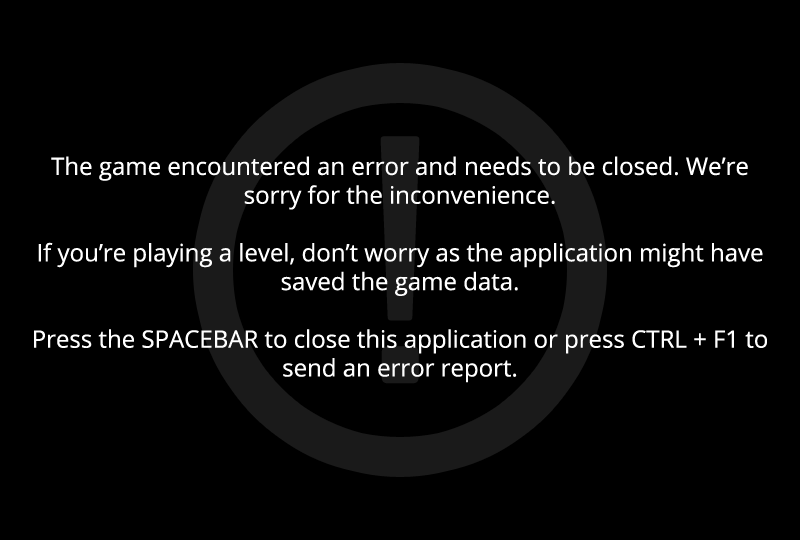
<style>
.page{position:relative;width:800px;height:540px;background:#000000}
.page>*{position:absolute;margin:0}
.t1{font:24px "OpenSans";color:#ffffff}
</style>
<div class="page">
<p class="t1" style="left:34px;top:156px;width:733px;height:227px;text-align:center">The game encountered an error and needs to be closed. We’re sorry for the inconvenience.<br><br>If you’re playing a level, don’t worry as the application might have saved the game data.<br><br>Press the SPACEBAR to close this application or press CTRL + F1 to send an error report.</p>
</div>
